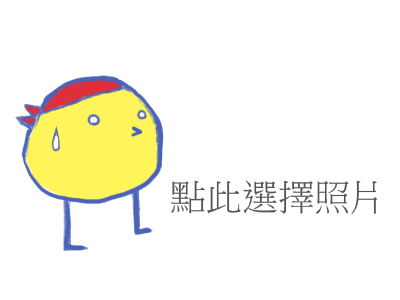
<style>
.page{position:relative;width:400px;height:300px;background:#ffffff}
.page>*{position:absolute;margin:0}
.t1{font:36px "MingLiU";color:#555555}
</style>
<div class="page">
<p class="t1" style="left:171px;top:180px;width:206px;height:34px">點此選擇照片</p>
</div>
